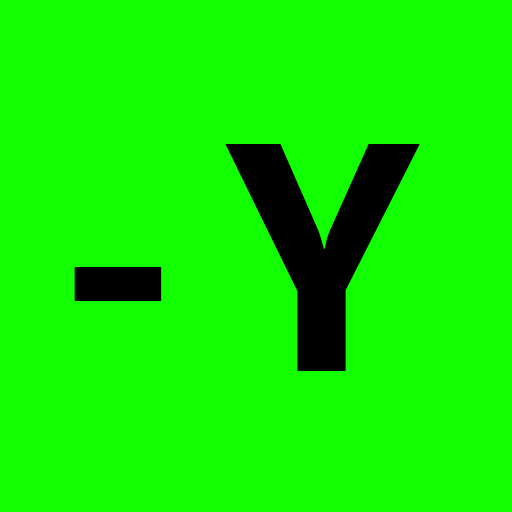
<style>
.page{position:relative;width:512px;height:512px;background:#11ff00}
.page>*{position:absolute;margin:0}
.t1{font:300px "MicrosoftYaHeiUI-Bold";letter-spacing:0.14em;color:#000000}
</style>
<div class="page">
<p class="t1" style="left:74px;top:144px;width:346px;height:227px">-Y</p>
</div>
